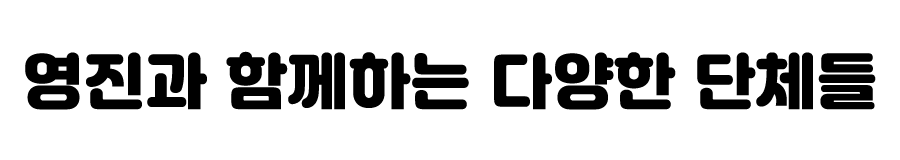
<style>
.page{position:relative;width:900px;height:160px;background:#ffffff}
.page>*{position:absolute;margin:0}
.t1{font:60px "Jalnan";color:#000000;font-weight:bold}
</style>
<div class="page">
<p class="t1" style="left:25px;top:51px;width:851px;height:59px">영진과 함께하는 다양한 단체들</p>
</div>
